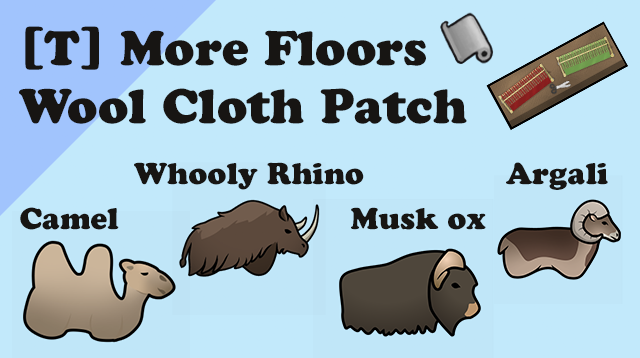
<style>
.page{position:relative;width:640px;height:358px;background:#c2e9fb}
.page>*{position:absolute;margin:0}
.t1{font:48px "CooperBlackStd";color:#171513}
.t2{font:30px "CooperBlackStd";color:#171513}
</style>
<div class="page">
<p class="t1" style="left:19px;top:26px;width:448px;height:98px">[T] More Floors<br>Wool Cloth Patch</p>
<p class="t2" style="left:134px;top:162px;width:230px;height:28px">Whooly Rhino</p>
<p class="t2" style="left:506px;top:162px;width:102px;height:28px">Argali</p>
<p class="t2" style="left:20px;top:207px;width:99px;height:23px">Camel</p>
<p class="t2" style="left:351px;top:207px;width:135px;height:23px">Musk ox</p>
</div>
